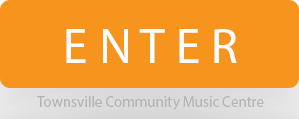
<style>
.page{position:relative;width:299px;height:119px;background:#f7941d}
.page>*{position:absolute;margin:0}
.t1{font:50px "MyriadPro-Regular";color:#ffffff}
.t2{font:15px "MyriadPro-Regular";color:#b4b4b4}
</style>
<div class="page">
<p class="t1" style="left:66px;top:29px;width:171px;height:34px">E N T E R</p>
<p class="t2" style="left:37px;top:96px;width:227px;height:14px">Townsville Community Music Centre</p>
</div>
